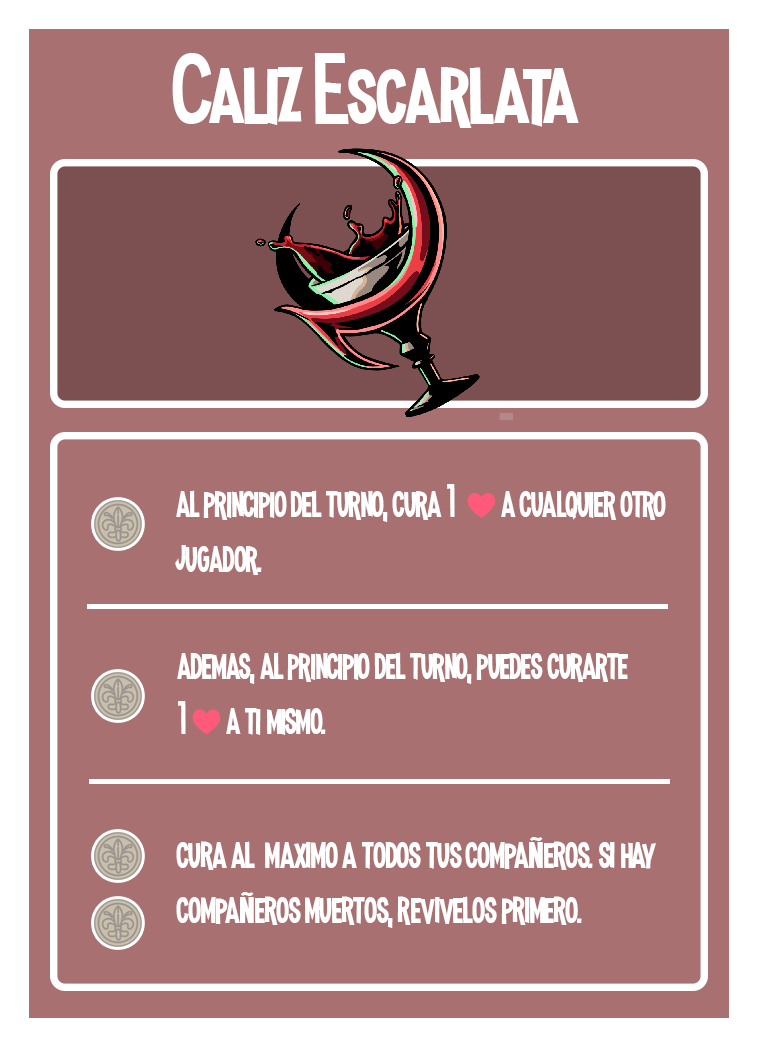
<style>
.page{position:relative;width:758px;height:1047px;background:#a87070}
.page>*{position:absolute;margin:0}
.t1{font:100px "MadnessHyperactive";color:#ffffff}
.t2{font:45.8px "MadnessHyperactive";color:#ffffff;scale:0.87 1}
.t3{font:33.3px "EmojiOneColor";color:#ffffff;scale:0.87 1}
.t4{font:45.8px "MadnessHyperactive";color:#ffffff;scale:0.89 1}
.t5{font:33.3px "Impact";color:#ffffff;scale:0.89 1}
</style>
<div class="page">
<p class="t1" style="left:172px;top:53px;width:407px;height:75px">Caliz Escarlata</p>
<p class="t2" style="left:175px;top:484px;width:491px;height:91px">al principio del turno, cura 1  <span class="t3">❤️ </span>a cualquier otro jugador.</p>
<p class="t2" style="left:177px;top:652px;width:452px;height:83px">ademas, al principio del turno, puedes curarte  1 <span class="t3">❤️</span> a ti mismo.</p>
<p class="t4" style="left:176px;top:837px;width:480px;height:91px">cura al  maximo a todos tus compa<span class="t5">Ñ</span>eros. si hay compa<span class="t5">Ñ</span>eros muertos, revivelos primero.</p>
</div>
